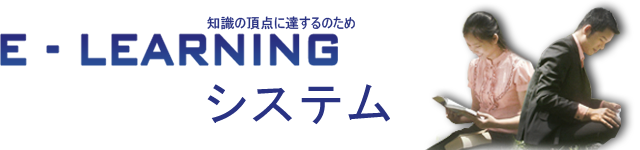
<style>
.page{position:relative;width:640px;height:150px;background:#ffffff}
.page>*{position:absolute;margin:0}
.t1{font:14px "MS-UIGothic";color:#293283}
.t2{font:48px "MS-Gothic";color:#293283}
</style>
<div class="page">
<p class="t1" style="left:207px;top:16px;width:148px;height:14px">知識の頂点に達するのため</p>
<p class="t2" style="left:207px;top:84px;width:183px;height:41px">システム</p>
</div>
